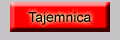
<style>
.page{position:relative;width:120px;height:40px;background:#c6c3c6}
.page>*{position:absolute;margin:0}
.t1{font:14px "ArialMT";color:#000000}
</style>
<div class="page">
<p class="t1" style="left:28px;top:12px;width:63px;height:13px">Tajemnica</p>
</div>
